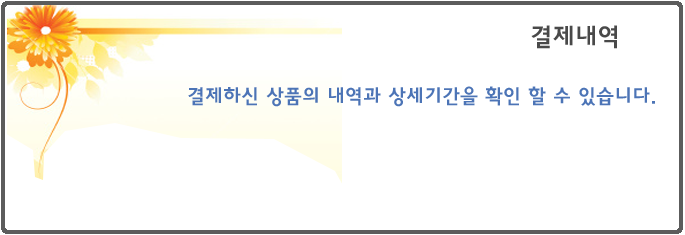
<style>
.page{position:relative;width:685px;height:235px;background:#ffffff}
.page>*{position:absolute;margin:0}
.t1{font:25px "HaanYGodic24";color:#494949}
.t2{font:20px "HaanYGodic24";color:#4c74b6}
</style>
<div class="page">
<p class="t1" style="left:531px;top:25px;width:86px;height:24px">결제내역</p>
<p class="t2" style="left:188px;top:86px;width:467px;height:21px">결제하신 상품의 내역과 상세기간을 확인 할 수 있습니다.</p>
</div>
